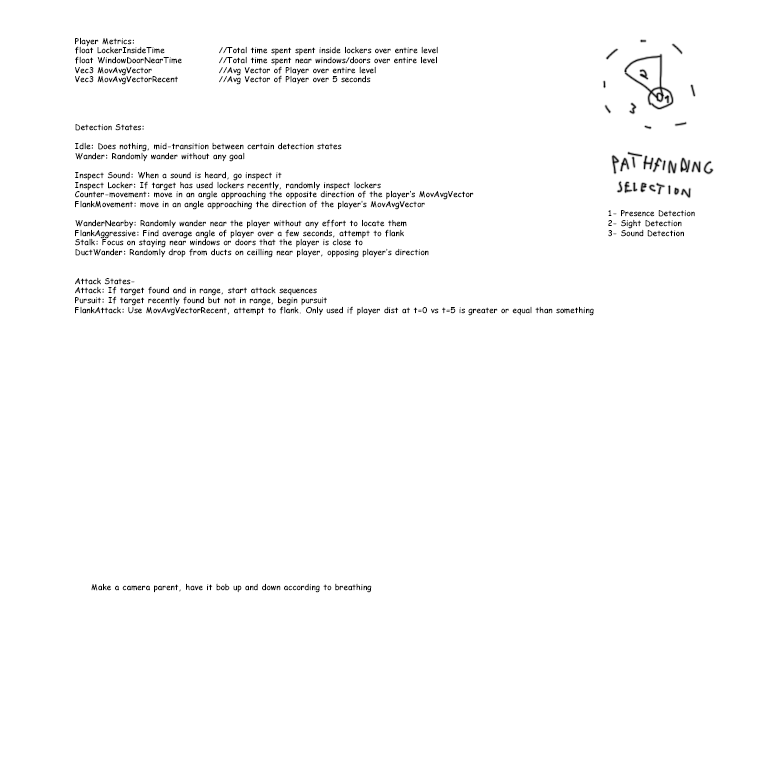
<style>
.page{position:relative;width:768px;height:768px;background:#ffffff}
.page>*{position:absolute;margin:0}
.t1{font:8px "ComicSansMS-Bold";color:#010101}
</style>
<div class="page">
<p class="t1" style="left:75px;top:37px;width:519px;height:279px">Player Metrics:<br>float LockerInsideTime  //Total time spent spent inside lockers over entire level<br>float WindowDoorNearTime  //Total time spent near windows/doors over entire level<br>Vec3 MovAvgVector  //Avg Vector of Player over entire level<br>Vec3 MovAvgVectorRecent  //Avg Vector of Player over 5 seconds<br><br><br><br><br>Detection States:<br><br>Idle: Does nothing, mid-transition between certain detection states<br>Wander: Randomly wander without any goal<br><br>Inspect Sound: When a sound is heard, go inspect it<br>Inspect Locker: If target has used lockers recently, randomly inspect lockers<br>Counter-movement: move in an angle approaching the opposite direction of the player’s MovAvgVector<br>FlankMovement: move in an angle approaching the direction of the player’s MovAvgVector<br><br>WanderNearby: Randomly wander near the player without any effort to locate them<br>FlankAggressive: Find average angle of player over a few seconds, attempt to flank<br>Stalk: Focus on staying near windows or doors that the player is close to<br>DuctWander: Randomly drop from ducts on ceilling near player, opposing player’s direction<br><br><br>Attack States-<br>Attack: If target found and in range, start attack sequences<br>Pursuit: If target recently found but not in range, begin pursuit<br>FlankAttack: Use MovAvgVectorRecent, attempt to flank. Only used if player dist at t=0 vs t=5 is greater or equal than something</p>
<p class="t1" style="left:608px;top:210px;width:87px;height:27px">1- Presence Detection<br>2- Sight Detection<br>3- Sound Detection</p>
<p class="t1" style="left:91px;top:583px;width:281px;height:10px">Make a camera parent, have it bob up and down according to breathing</p>
</div>
